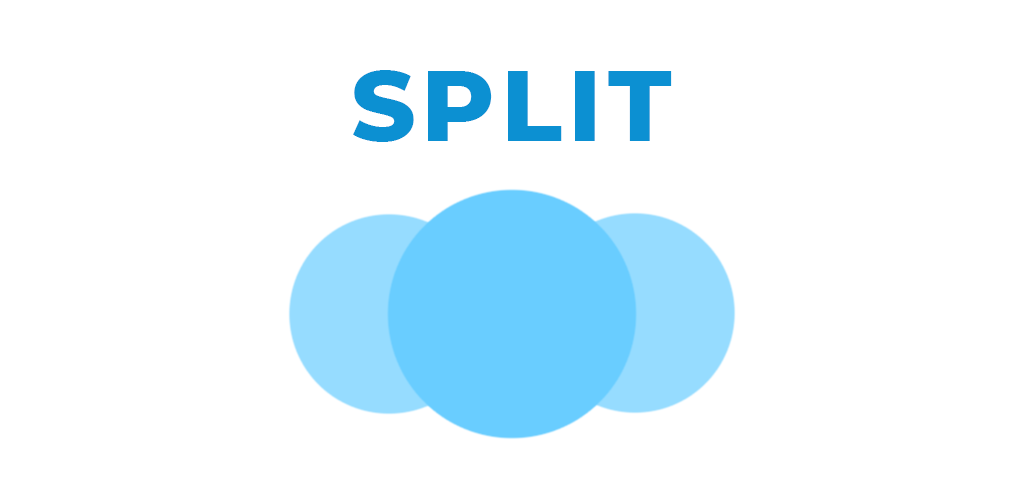
<style>
.page{position:relative;width:1024px;height:500px;background:#ffffff}
.page>*{position:absolute;margin:0}
.t1{font:100px "Montserrat-ExtraBold";letter-spacing:0.06em;color:#0c90d2}
</style>
<div class="page">
<p class="t1" style="left:353px;top:70px;width:319px;height:72px">SPLIT</p>
</div>
